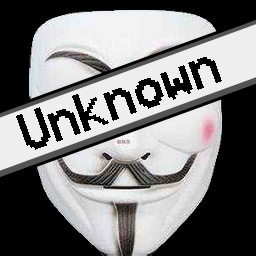
<style>
.page{position:relative;width:256px;height:256px;background:#000000}
.page>*{position:absolute;margin:0}
.t1{font:60px "Fixedsys";color:#000000}
</style>
<div class="page">
<p class="t1" style="left:16px;top:57px;width:206px;height:93px;rotate:-20deg">Unknown</p>
</div>
